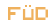
<style>
.page{position:relative;width:50px;height:24px;background:#ffffff}
.page>*{position:absolute;margin:0}
.t1{font:25px "VisitorTT1BRK";color:#efb15d}
.t2{font:20.8px "VisitorTT1BRK";color:#efb15d}
</style>
<div class="page">
<p class="t1" style="left:8px;top:7px;width:40px;height:13px">f<span class="t2">u</span>d</p>
</div>
